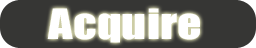
<style>
.page{position:relative;width:256px;height:48px;background:#363634}
.page>*{position:absolute;margin:0}
.t1{font:38.4px "Impact";color:#ffffff;scale:1.25 1}
</style>
<div class="page">
<p class="t1" style="left:47px;top:8px;width:153px;height:35px">Acquire</p>
</div>
